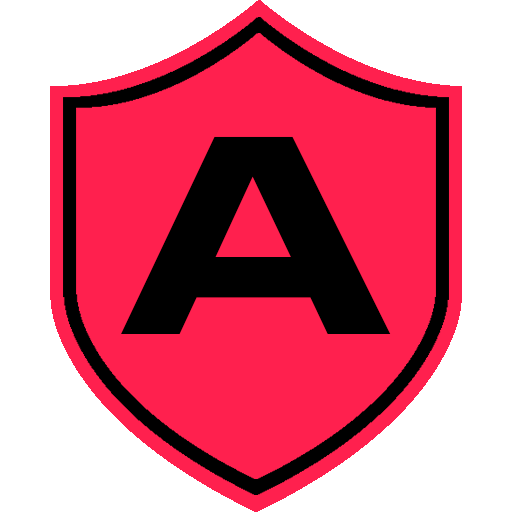
<style>
.page{position:relative;width:512px;height:512px;background:#ff204e}
.page>*{position:absolute;margin:0}
.t1{font:264.4px "DrukTextWide-Medium";color:#000000;scale:1.07 1}
</style>
<div class="page">
<p class="t1" style="left:121px;top:136px;width:270px;height:198px">A</p>
</div>
